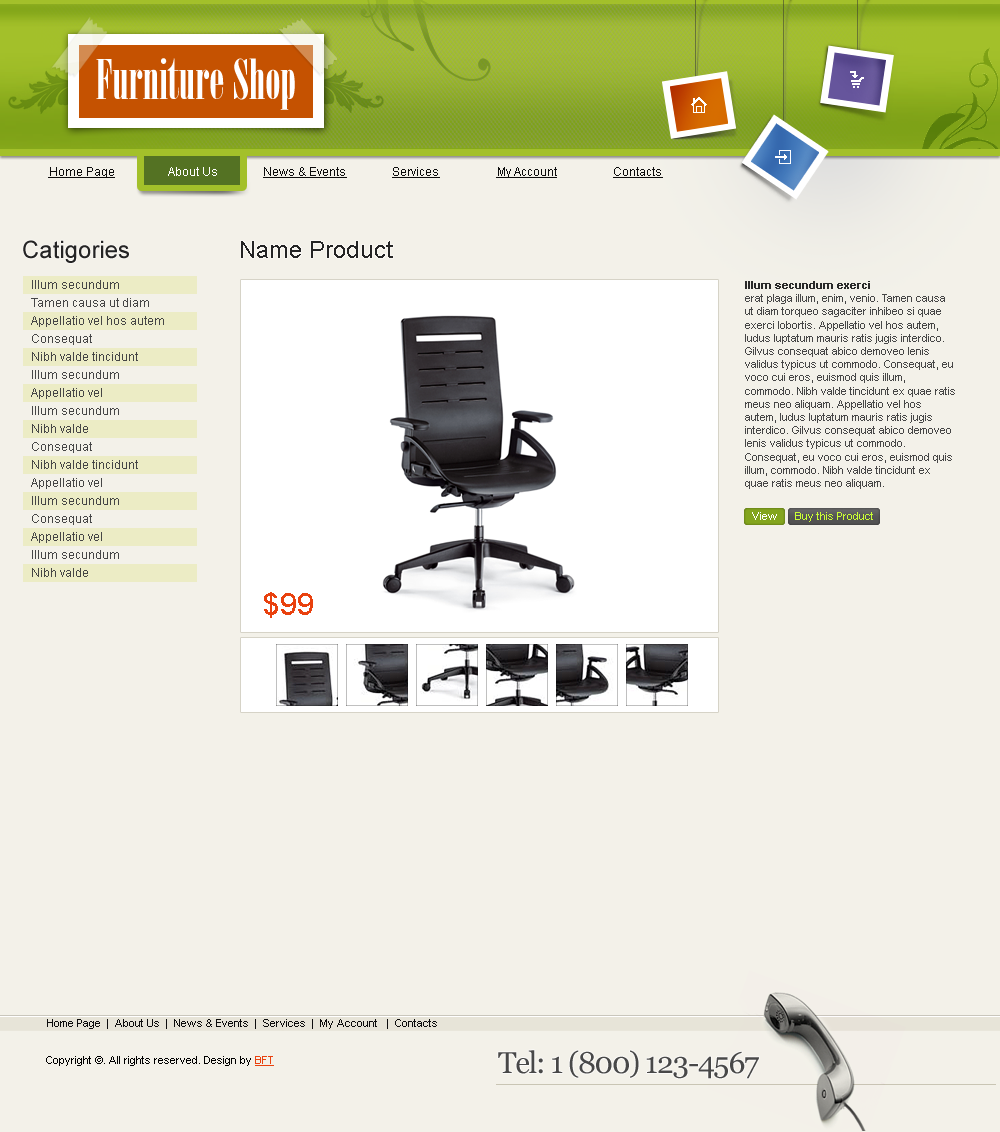
<style>
.page{position:relative;width:1000px;height:1132px;background:#f3f1e9}
.page>*{position:absolute;margin:0}
.t1{font:60px "Arsis";color:#ffffff}
.t2{font:12px "ArialMT";color:#0d0d0d;text-decoration:underline}
.t3{font:12px "ArialMT";text-decoration:underline}
.t4{font:12px "ArialMT";color:#ffffff}
.t5{font:24px "ArialMT";color:#242424}
.t6{font:12px "ArialMT";color:#464646}
.t7{font:11px "ArialMT";color:#464646}
.t8{font:11px "Arial-BoldMT";color:#292929}
.t9{font:10.4px "ArialMT";color:#ffffff}
.t10{font:10.4px "ArialMT";color:#caff34}
.t11{font:30px "ArialMT";color:#e9410e}
.t12{font:11px "ArialMT";color:#0d0d0d}
.t13{font:11px "ArialMT";color:#000000}
.t14{font:11px "ArialMT";color:#e9410e;text-decoration:underline}
.t15{font:30px "Georgia";letter-spacing:-0.04em;color:#484848}
</style>
<div class="page">
<p class="t1" style="left:96px;top:58px;width:199px;height:52px">Furniture Shop</p>
<p class="t2" style="left:48px;top:167px;width:67px;height:11px">Home Page</p>
<p class="t3" style="left:167px;top:167px;width:51px;height:11px">About Us</p>
<p class="t4" style="left:168px;top:167px;width:49px;height:9px">About Us</p>
<p class="t2" style="left:263px;top:167px;width:84px;height:11px">News &amp; Events</p>
<p class="t2" style="left:392px;top:167px;width:48px;height:11px">Services</p>
<p class="t2" style="left:496px;top:167px;width:61px;height:11px">My Account</p>
<p class="t2" style="left:613px;top:167px;width:50px;height:11px">Contacts</p>
<p class="t5" style="left:23px;top:240px;width:106px;height:23px">Catigories</p>
<p class="t5" style="left:241px;top:241px;width:152px;height:17px">Name Product</p>
<p class="t6" style="left:32px;top:280px;width:87px;height:9px">Illum secundum</p>
<p class="t7" style="left:745px;top:281px;width:210px;height:208px"><span class="t8">Illum secundum exerci <br></span>erat plaga illum, enim, venio. Tamen causa ut diam torqueo sagaciter inhibeo si quae exerci lobortis. Appellatio vel hos autem, ludus luptatum mauris ratis jugis interdico. Gilvus consequat abico demoveo lenis validus typicus ut commodo. Consequat, eu voco cui eros, euismod quis illum, commodo. Nibh valde tincidunt ex quae ratis meus neo aliquam. Appellatio vel hos autem, ludus luptatum mauris ratis jugis interdico. Gilvus consequat abico demoveo lenis validus typicus ut commodo. Consequat, eu voco cui eros, euismod quis illum, commodo. Nibh valde tincidunt ex quae ratis meus neo aliquam.</p>
<p class="t6" style="left:31px;top:298px;width:118px;height:9px">Tamen causa ut diam</p>
<p class="t6" style="left:31px;top:316px;width:133px;height:11px">Appellatio vel hos autem</p>
<p class="t6" style="left:32px;top:334px;width:60px;height:11px">Consequat</p>
<p class="t6" style="left:32px;top:352px;width:106px;height:9px">Nibh valde tincidunt</p>
<p class="t6" style="left:32px;top:370px;width:87px;height:9px">Illum secundum</p>
<p class="t6" style="left:31px;top:388px;width:71px;height:11px">Appellatio vel</p>
<p class="t6" style="left:32px;top:406px;width:87px;height:9px">Illum secundum</p>
<p class="t6" style="left:32px;top:424px;width:56px;height:9px">Nibh valde</p>
<p class="t6" style="left:32px;top:442px;width:60px;height:11px">Consequat</p>
<p class="t6" style="left:32px;top:460px;width:106px;height:9px">Nibh valde tincidunt</p>
<p class="t6" style="left:31px;top:478px;width:71px;height:11px">Appellatio vel</p>
<p class="t6" style="left:32px;top:496px;width:87px;height:9px">Illum secundum</p>
<p class="t6" style="left:32px;top:514px;width:60px;height:11px">Consequat</p>
<p class="t9" style="left:752px;top:512px;width:25px;height:8px">View</p>
<p class="t10" style="left:795px;top:512px;width:78px;height:10px">Buy this Product</p>
<p class="t6" style="left:31px;top:532px;width:71px;height:11px">Appellatio vel</p>
<p class="t6" style="left:32px;top:550px;width:87px;height:9px">Illum secundum</p>
<p class="t6" style="left:32px;top:568px;width:56px;height:9px">Nibh valde</p>
<p class="t11" style="left:264px;top:592px;width:49px;height:26px">$99</p>
<p class="t12" style="left:47px;top:1019px;width:390px;height:10px">Home Page  |  About Us  |  News &amp; Events  |  Services  |  My Account   |  Contacts</p>
<p class="t13" style="left:46px;top:1056px;width:228px;height:10px">Copyright ©. All rights reserved. Design by <span class="t14">BFT</span></p>
<p class="t15" style="left:498px;top:1050px;width:261px;height:29px">Tel: 1 (800) 123-4567</p>
</div>
